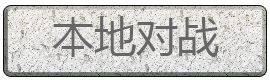
<style>
.page{position:relative;width:270px;height:80px}
.page>*{position:absolute;margin:0}
.t1{font:41.7px "MicrosoftYaHei";color:#666666}
</style>
<div class="page">
<p class="t1" style="left:52px;top:16px;width:167px;height:41px">本地对战</p>
</div>
